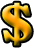
<style>
.page{position:relative;width:34px;height:48px;background:#ffffff}
.page>*{position:absolute;margin:0}
.t1{font:48.3px "BernardMT-Condensed";scale:1.26 1}
</style>
<div class="page">
<p class="t1" style="left:2px;top:2px;width:30px;height:44px">$</p>
</div>
